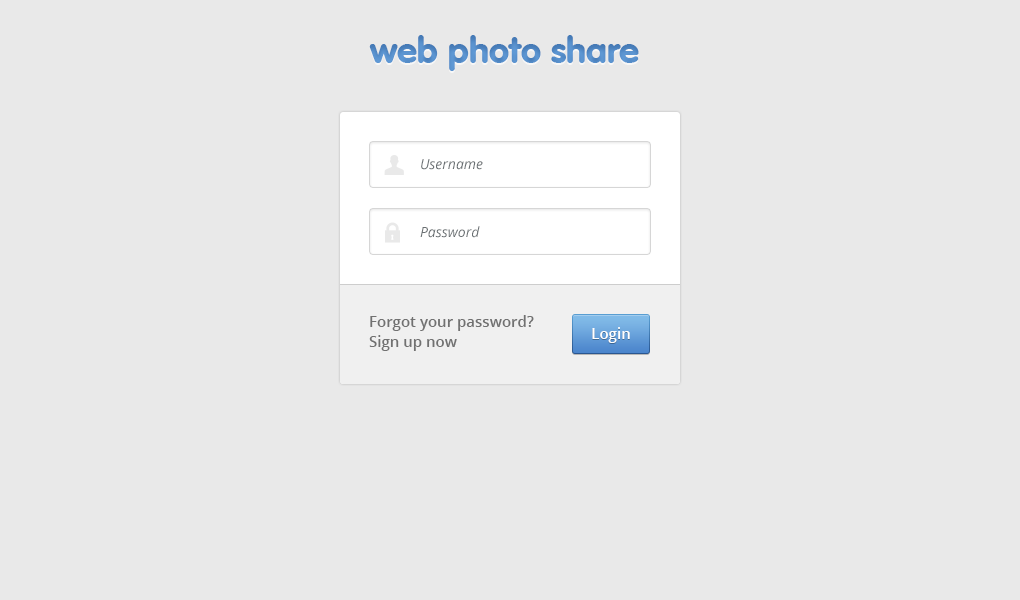
<style>
.page{position:relative;width:1020px;height:600px;background:#e9e9e9}
.page>*{position:absolute;margin:0}
.t1{font:36px "VAGRounded-Black";color:#619bd7}
.t2{font:14px "OpenSans-Italic";color:#6a7073}
.t3{font:15px/20px "OpenSans-Semibold";color:#717171}
.t4{font:15px "OpenSans-Semibold";color:#ffffff}
</style>
<div class="page">
<p class="t1" style="left:369px;top:35px;width:270px;height:36px">web photo share</p>
<p class="t2" style="left:421px;top:159px;width:62px;height:11px">Username</p>
<p class="t2" style="left:420px;top:226px;width:60px;height:12px">Password</p>
<p class="t3" style="left:369px;top:315px;width:165px;height:36px">Forgot your password?<br>Sign up now</p>
<p class="t4" style="left:592px;top:327px;width:38px;height:16px">Login</p>
</div>
